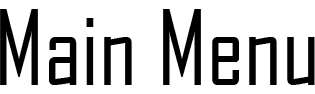
<style>
.page{position:relative;width:315px;height:94px;background:#ffffff}
.page>*{position:absolute;margin:0}
.t1{font:100px "AgencyFB-Reg";color:#000000}
</style>
<div class="page">
<p class="t1" style="left:0px;top:9px;width:315px;height:76px">Main Menu</p>
</div>
